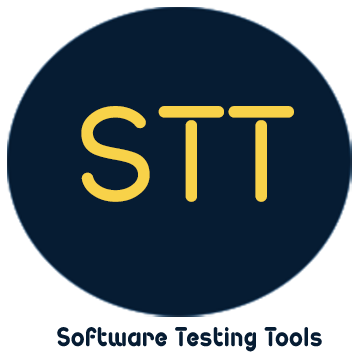
<style>
.page{position:relative;width:360px;height:360px;background:#061c33}
.page>*{position:absolute;margin:0}
.t1{font:135.7px "PestaStencilDemo";letter-spacing:0.025em;color:#f8d249}
.t2{font:27.1px "PestaStencilDemo-Bold";letter-spacing:0.025em;color:#061c33;scale:0.87 1}
</style>
<div class="page">
<p class="t1" style="left:81px;top:106px;width:213px;height:96px">STT</p>
<p class="t2" style="left:57px;top:327px;width:265px;height:25px">Software Testing Tools</p>
</div>
